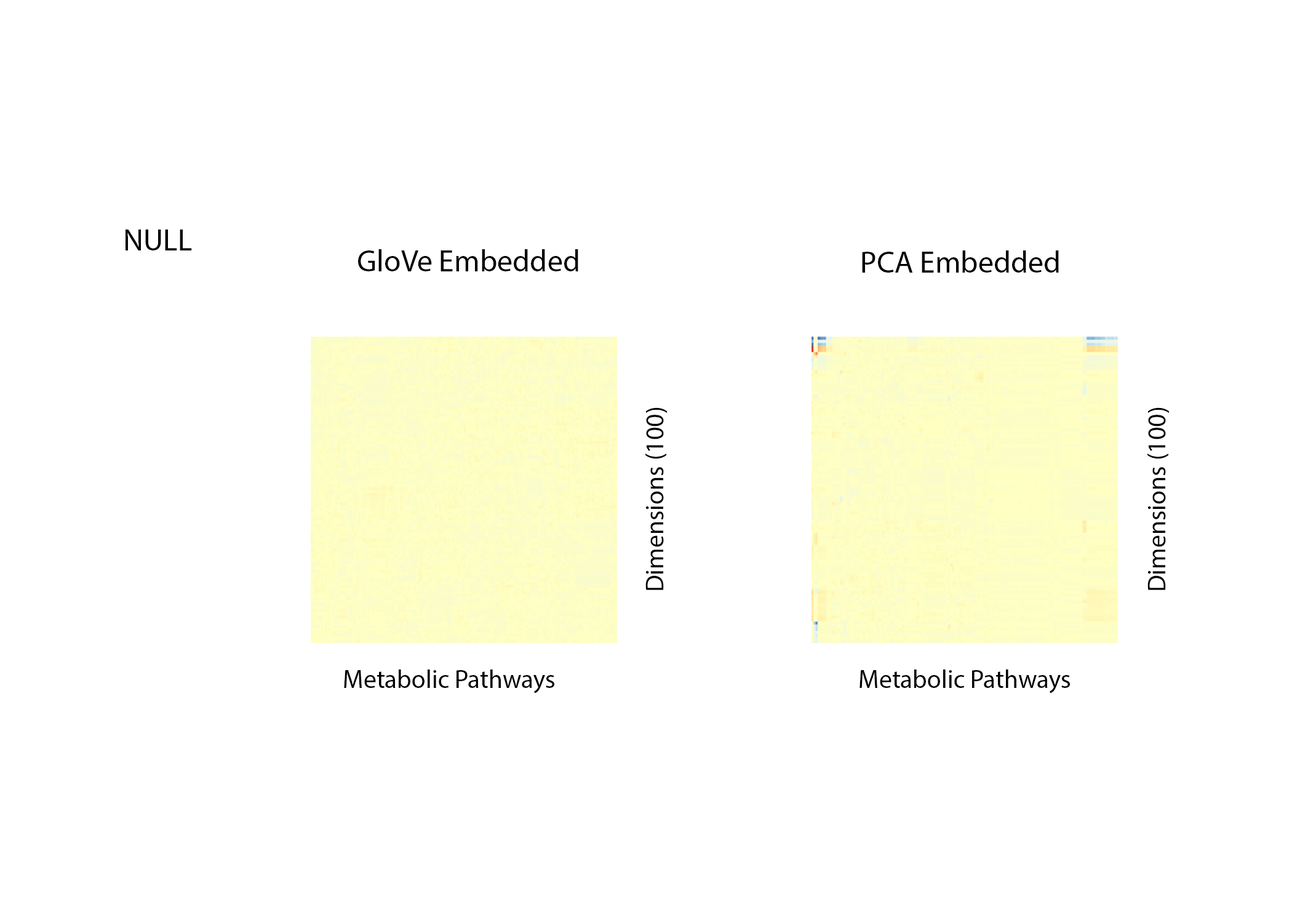
<style>
.page{position:relative;width:1292px;height:923px;background:#ffffff}
.page>*{position:absolute;margin:0}
.t1{font:30.8px "MyriadPro-Regular";color:#000000}
.t2{font:25.6px "MyriadPro-Regular";color:#000000}
</style>
<div class="page">
<p class="t1" style="left:126px;top:229px;width:66px;height:21px">NULL</p>
<p class="t1" style="left:358px;top:249px;width:220px;height:22px">GloVe Embedded</p>
<p class="t1" style="left:862px;top:250px;width:197px;height:23px">PCA Embedded</p>
<p class="t2" style="left:645px;top:407px;width:23px;height:183px;rotate:-90deg">Dimensions (100)</p>
<p class="t2" style="left:1147px;top:407px;width:23px;height:183px;rotate:-90deg">Dimensions (100)</p>
<p class="t2" style="left:344px;top:669px;width:210px;height:24px">Metabolic Pathways</p>
<p class="t2" style="left:860px;top:669px;width:210px;height:24px">Metabolic Pathways</p>
</div>
